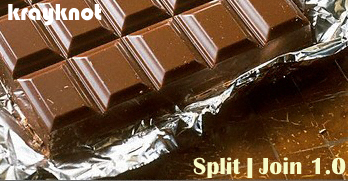
<style>
.page{position:relative;width:348px;height:181px}
.page>*{position:absolute;margin:0}
.t1{font:24px "Bauhaus93";color:#ffffff}
.t2{font:24px "BritannicBold";color:#f7f9c5}
</style>
<div class="page">
<p class="t1" style="left:8px;top:4px;width:94px;height:22px">krayknot</p>
<p class="t2" style="left:193px;top:157px;width:153px;height:21px">Split | Join 1.0</p>
</div>
